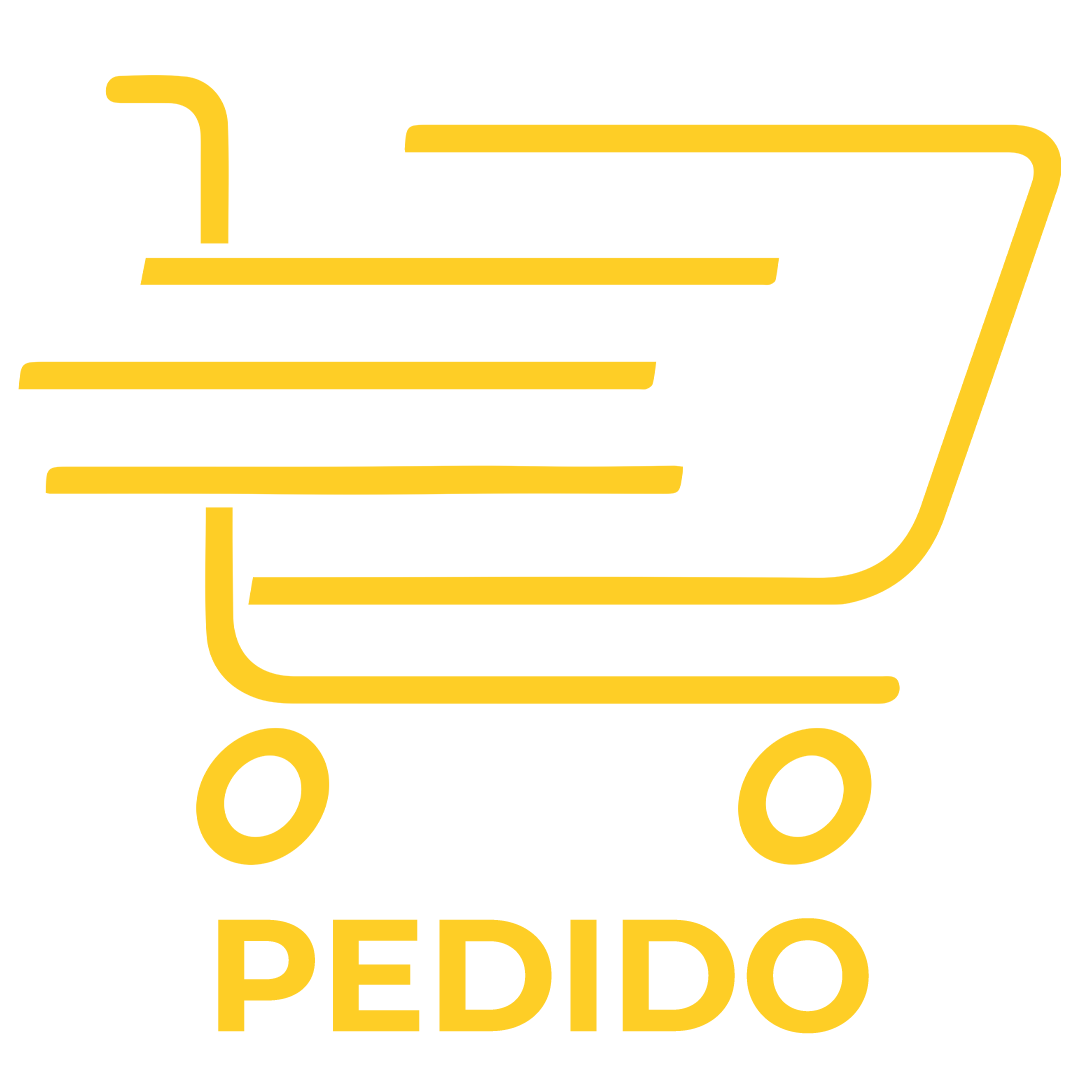
<style>
.page{position:relative;width:1080px;height:1080px;background:#ffffff}
.page>*{position:absolute;margin:0}
.t1{font:158.8px "Montserrat-Bold";color:#fece26;text-transform:uppercase}
</style>
<div class="page">
<p class="t1" style="left:218px;top:918px;width:651px;height:116px">Pedido</p>
</div>
